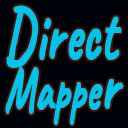
<style>
.page{position:relative;width:128px;height:128px;background:#000209}
.page>*{position:absolute;margin:0}
.t1{font:75.6px "Caveat-Bold";color:#03c4eb;font-weight:bold;scale:0.64 1}
.t2{font:63px "Caveat-Bold";color:#03c4eb;font-weight:bold;scale:0.64 1}
</style>
<div class="page">
<p class="t1" style="left:5px;top:5px;width:119px;height:120px">Direct <span class="t2">Mappe</span>r</p>
</div>
